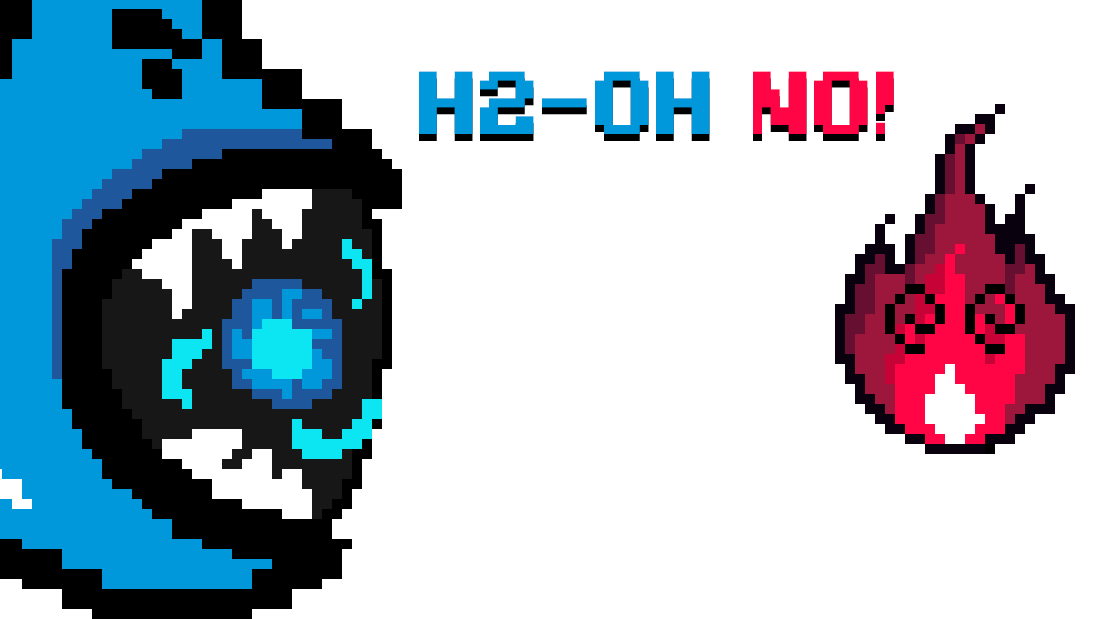
<style>
.page{position:relative;width:1100px;height:619px;background:#ffffff}
.page>*{position:absolute;margin:0}
.t1{font:91.5px "PixelDigivolve";letter-spacing:-0.01em;color:#0098db}
.t2{font:91.5px "PixelDigivolve";letter-spacing:-0.01em;color:#ff0546}
</style>
<div class="page">
<p class="t1" style="left:419px;top:71px;width:475px;height:63px">H2-Oh <span class="t2">No!</span></p>
</div>
